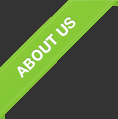
<style>
.page{position:relative;width:118px;height:119px;background:#333333}
.page>*{position:absolute;margin:0}
.t1{font:15px "HelveticaNeue-Bold";color:#ffffff;text-transform:uppercase}
</style>
<div class="page">
<p class="t1" style="left:17px;top:17px;width:59px;height:61px;rotate:-45deg">About Us</p>
</div>
